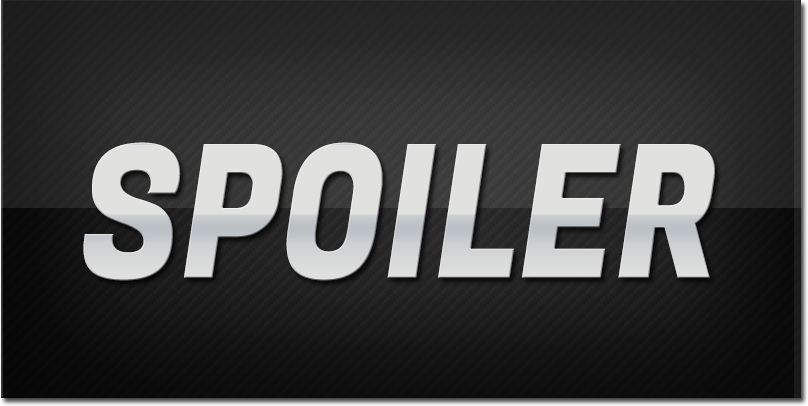
<style>
.page{position:relative;width:808px;height:406px}
.page>*{position:absolute;margin:0}
.t1{font:185.7px "FugazOne-Regular";color:#dfdfdf;scale:0.84 1}
</style>
<div class="page">
<p class="t1" style="left:83px;top:142px;width:632px;height:139px">SPOILER</p>
</div>
